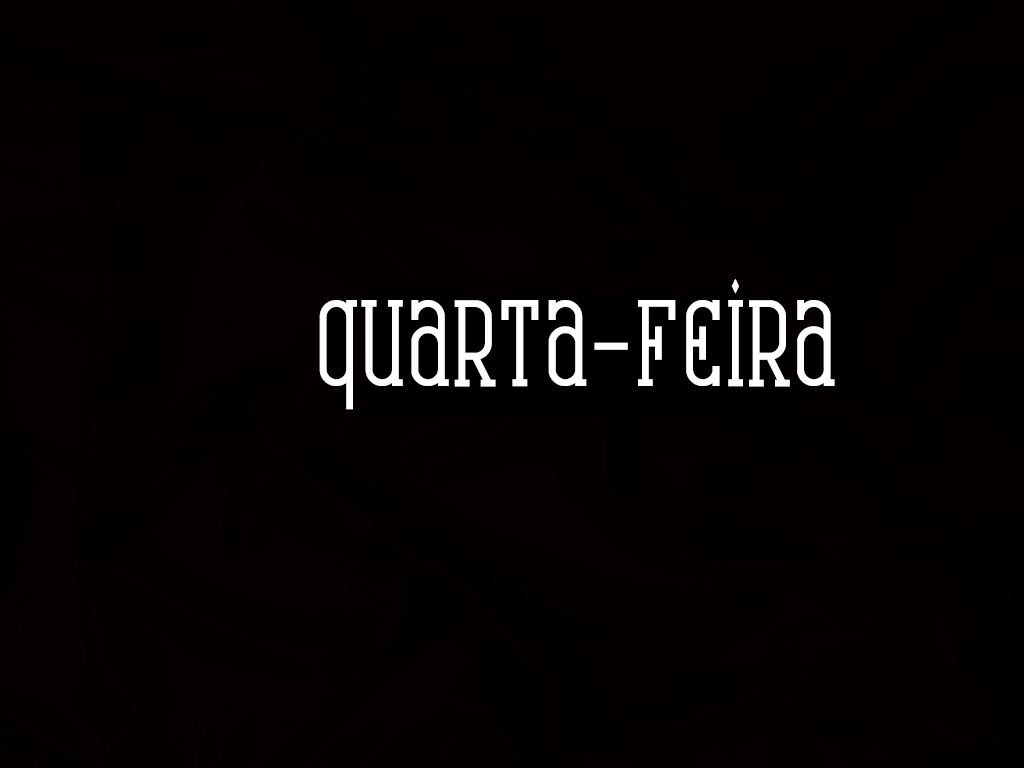
<style>
.page{position:relative;width:1024px;height:768px;background:#040000}
.page>*{position:absolute;margin:0}
.t1{font:132px "CatharsisRequiemBold";letter-spacing:-0.003em;color:#ffffff}
</style>
<div class="page">
<p class="t1" style="left:319px;top:279px;width:516px;height:131px">quarta-feira</p>
</div>
